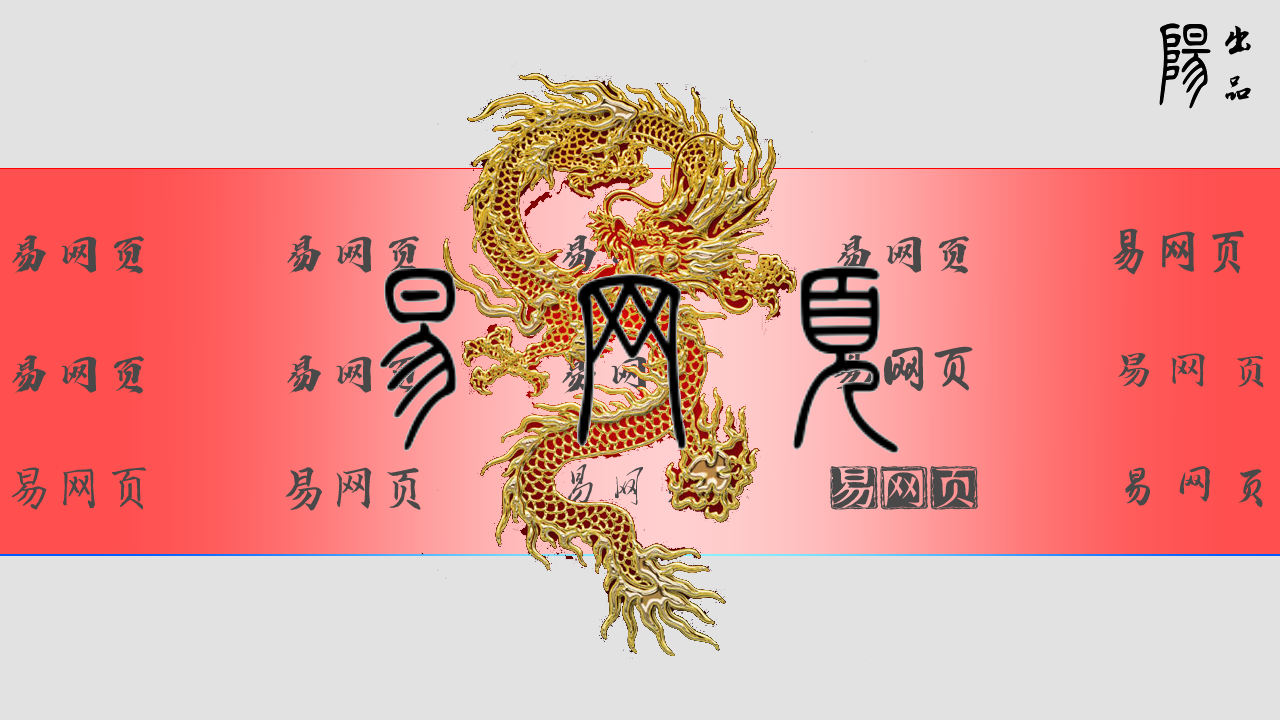
<style>
.page{position:relative;width:1280px;height:720px;background:#e2e2e2}
.page>*{position:absolute;margin:0}
.t1{font:40px "ZhiMangXing-Regular";color:#000000}
.t2{font:50px "Zcool-MiaoDianFengYun";color:#494949}
.t3{font:50px "SJweibei-Regular";color:#494949}
.t4{font:50px "NGrixikaixing";color:#494949}
.t5{font:50px "Slidechunfeng-Regular";color:#494949}
.t6{font:50px "NGlongyingbei";color:#494949}
.t7{font:50px "NGliuzhiwenxinkai";color:#494949}
.t8{font:50px "SJhym-Regular";color:#494949}
.t9{font:50px "NGheidong201904";color:#494949}
.t10{font:50px "Slidexiaxing-Regular";color:#494949}
</style>
<div class="page">
<p class="t1" style="left:1225px;top:25px;width:27px;height:76px">出<br>品</p>
<p class="t2" style="left:11px;top:228px;width:1253px;height:283px">易网页     易网页     易网页     易网页     <span class="t3">易网页<br><br></span>易网页     易网页     易网页     <span class="t4">易网页     </span><span class="t5">易网页<br><br></span><span class="t6">易网页     </span><span class="t7">易网页     </span><span class="t8">易网页     </span><span class="t9">易网页     </span><span class="t10">易网页</span></p>
</div>
